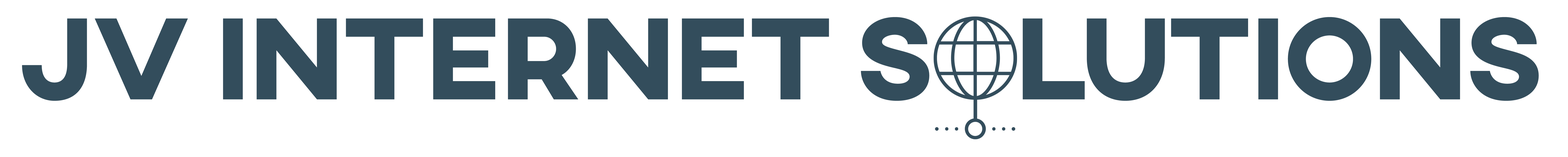
<style>
.page{position:relative;width:1568px;height:157px;background:#ffffff}
.page>*{position:absolute;margin:0}
.t1{font:118.5px "AXIS-ExtraBold";letter-spacing:-0.05em;color:#334d5c;font-weight:bold}
</style>
<div class="page">
<p class="t1" style="left:22px;top:17px;width:907px;height:84px">JV Internet S</p>
<p class="t1" style="left:1023px;top:17px;width:516px;height:84px">lutions</p>
</div>
